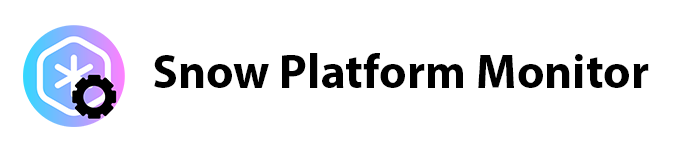
<style>
.page{position:relative;width:680px;height:150px;background:#ffffff}
.page>*{position:absolute;margin:0}
.t1{font:48px "MyriadPro-Bold";color:#000000}
</style>
<div class="page">
<p class="t1" style="left:154px;top:53px;width:495px;height:35px">Snow Platform Monitor</p>
</div>
